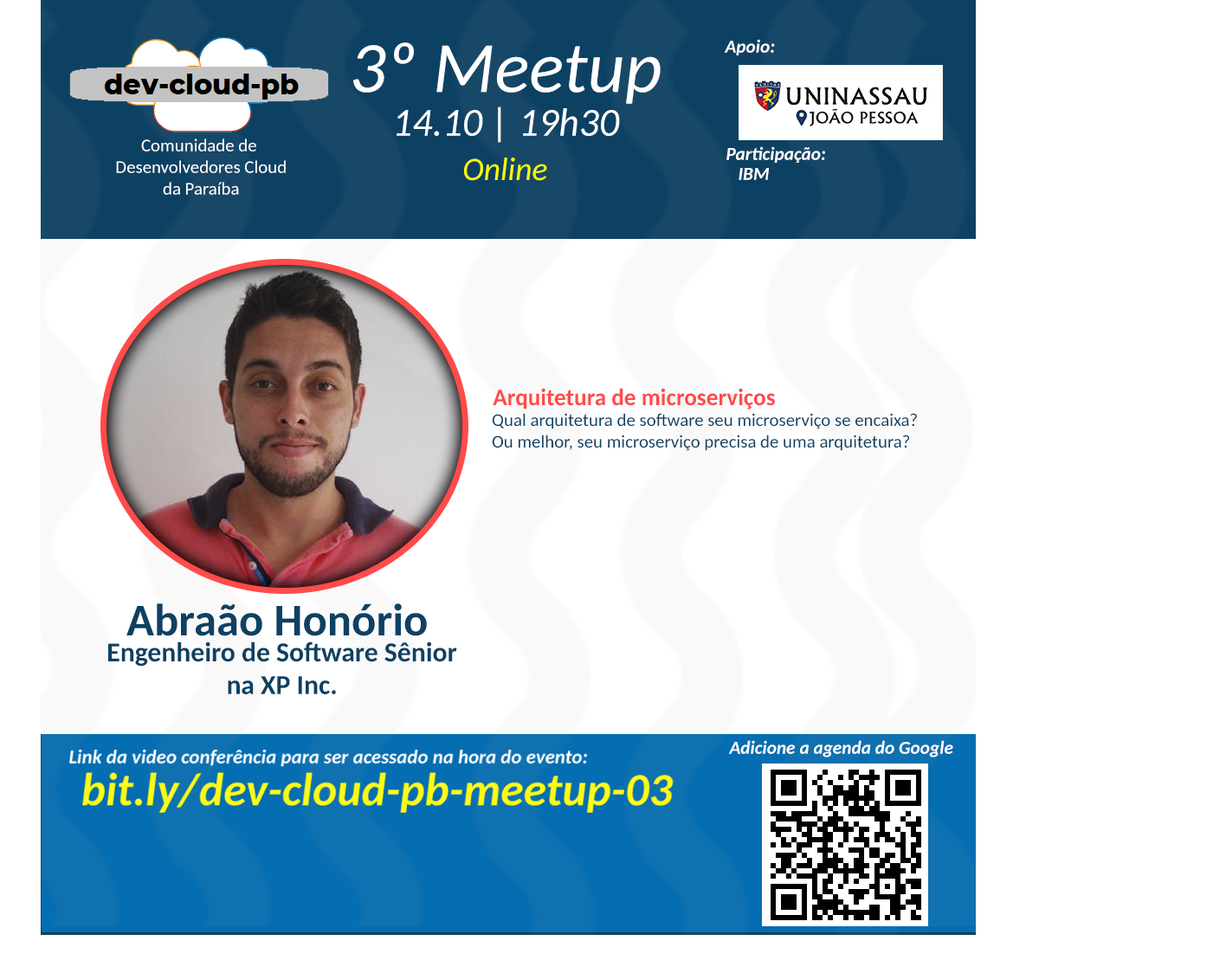
<style>
.page{position:relative;width:1226px;height:973px;background:#ffffff}
.page>*{position:absolute;margin:0}
.t1{font:18.4px "Carlito-BoldItalic";color:#ffffff}
.t2{font:72.3px "Carlito-Italic";color:#ffffff}
.t3{font:39.6px "Carlito-Italic";color:#ffffff}
.t4{font:18px "Carlito";color:#ffffff}
.t5{font:32.4px "Carlito-Italic";color:#f8fb00}
.t6{font:23.5px "Carlito-Bold";color:#ff4b4a}
.t7{font:18px "Carlito";color:#0d4163}
.t8{font:45.5px "Carlito-Bold";color:#0d4163}
.t9{font:27.3px "Carlito-Bold";color:#0d4163}
</style>
<div class="page">
<p class="t1" style="left:724px;top:39px;width:51px;height:16px">Apoio:</p>
<p class="t2" style="left:352px;top:42px;width:308px;height:62px">3º Meetup</p>
<p class="t3" style="left:396px;top:106px;width:224px;height:37px">14.10 | 19h30</p>
<p class="t4" style="left:116px;top:138px;width:170px;height:57px;text-align:center">Comunidade de <br>Desenvolvedores Cloud<br>da Paraíba</p>
<p class="t1" style="left:726px;top:146px;width:99px;height:17px">Participação:</p>
<p class="t5" style="left:464px;top:158px;width:83px;height:23px">Online</p>
<p class="t1" style="left:738px;top:168px;width:31px;height:12px">IBM</p>
<p class="t6" style="left:493px;top:388px;width:282px;height:21px">Arquitetura de microserviços</p>
<p class="t7" style="left:492px;top:413px;width:425px;height:38px">Qual arquitetura de software seu microserviço se encaixa? <br>Ou melhor, seu microserviço precisa de uma arquitetura?</p>
<p class="t8" style="left:126px;top:603px;width:301px;height:33px">Abraão Honório</p>
<p class="t9" style="left:108px;top:641px;width:349px;height:53px;text-align:center">Engenheiro de Software Sênior<br>na XP Inc.</p>
<p class="t1" style="left:728px;top:740px;width:225px;height:17px">Adicione a agenda do Google</p>
</div>
